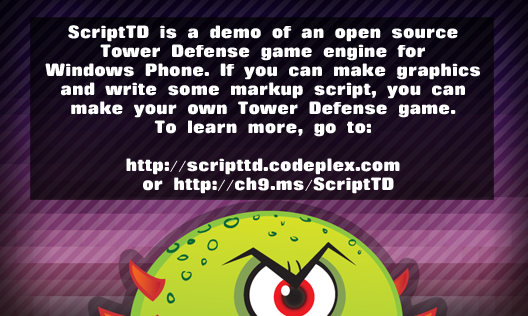
<style>
.page{position:relative;width:528px;height:316px}
.page>*{position:absolute;margin:0}
.t1{font:15.8px "RollingNoOne-ExtraBold";color:#ffffff}
</style>
<div class="page">
<p class="t1" style="left:45px;top:25px;width:435px;height:169px;text-align:center">ScriptTD is a demo of an open source <br>Tower Defense game engine for <br>Windows Phone. If you can make graphics <br>and write some markup script, you can <br>make your own Tower Defense game. <br>To learn more, go to: <br><br>http://scripttd.codeplex.com <br>or http://ch9.ms/ScriptTD</p>
</div>
